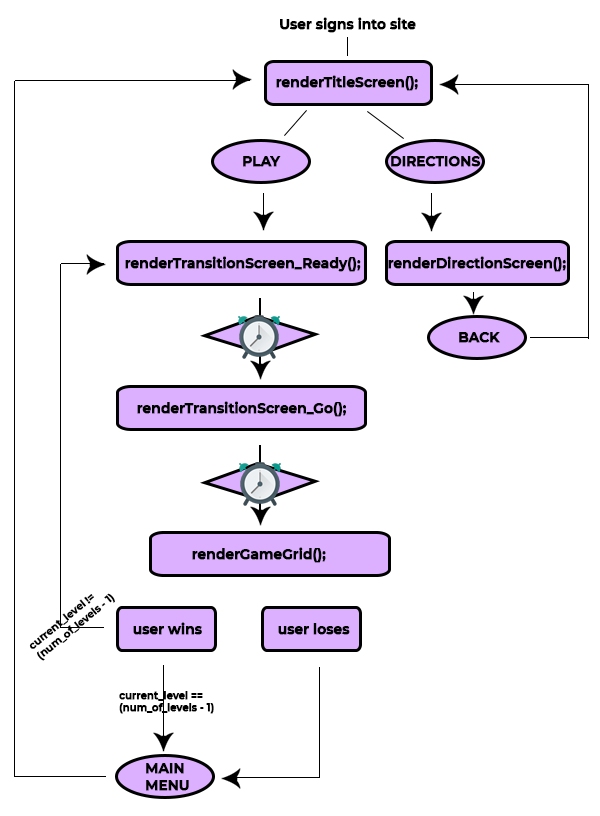
<style>
.page{position:relative;width:600px;height:816px;background:#ffffff}
.page>*{position:absolute;margin:0}
.t1{font:14px "Montserrat-Bold";letter-spacing:-0.03em;color:#000000;font-weight:bold}
.t2{font:10.8px "Montserrat-Bold";letter-spacing:-0.03em;color:#000000;font-weight:bold;scale:0.95 1}
.t3{font:10.4px "Montserrat-Bold";letter-spacing:-0.03em;color:#000000;font-weight:bold}
</style>
<div class="page">
<p class="t1" style="left:280px;top:17px;width:136px;height:16px">User signs into site</p>
<p class="t1" style="left:276px;top:75px;width:142px;height:16px">renderTitleScreen();</p>
<p class="t1" style="left:243px;top:156px;width:38px;height:11px">PLAY</p>
<p class="t1" style="left:391px;top:156px;width:90px;height:11px">DIRECTIONS</p>
<p class="t1" style="left:125px;top:256px;width:236px;height:16px">renderTransitionScreen_Ready();</p>
<p class="t1" style="left:388px;top:256px;width:178px;height:16px">renderDirectionScreen();</p>
<p class="t1" style="left:459px;top:332px;width:41px;height:11px">BACK</p>
<p class="t1" style="left:137px;top:401px;width:209px;height:16px">renderTransitionScreen_Go();</p>
<p class="t1" style="left:192px;top:547px;width:134px;height:16px">renderGameGrid();</p>
<p class="t2" style="left:29px;top:593px;width:86px;height:68px;rotate:-39deg">current_level != <br>(num_of_levels - 1)</p>
<p class="t1" style="left:133px;top:622px;width:69px;height:13px">user wins</p>
<p class="t1" style="left:278px;top:623px;width:72px;height:12px">user loses</p>
<p class="t3" style="left:119px;top:691px;width:95px;height:23px">current_level == <br>(num_of_levels - 1)</p>
<p class="t1" style="left:146px;top:763px;width:43px;height:28px">MAIN<br>MENU</p>
</div>
